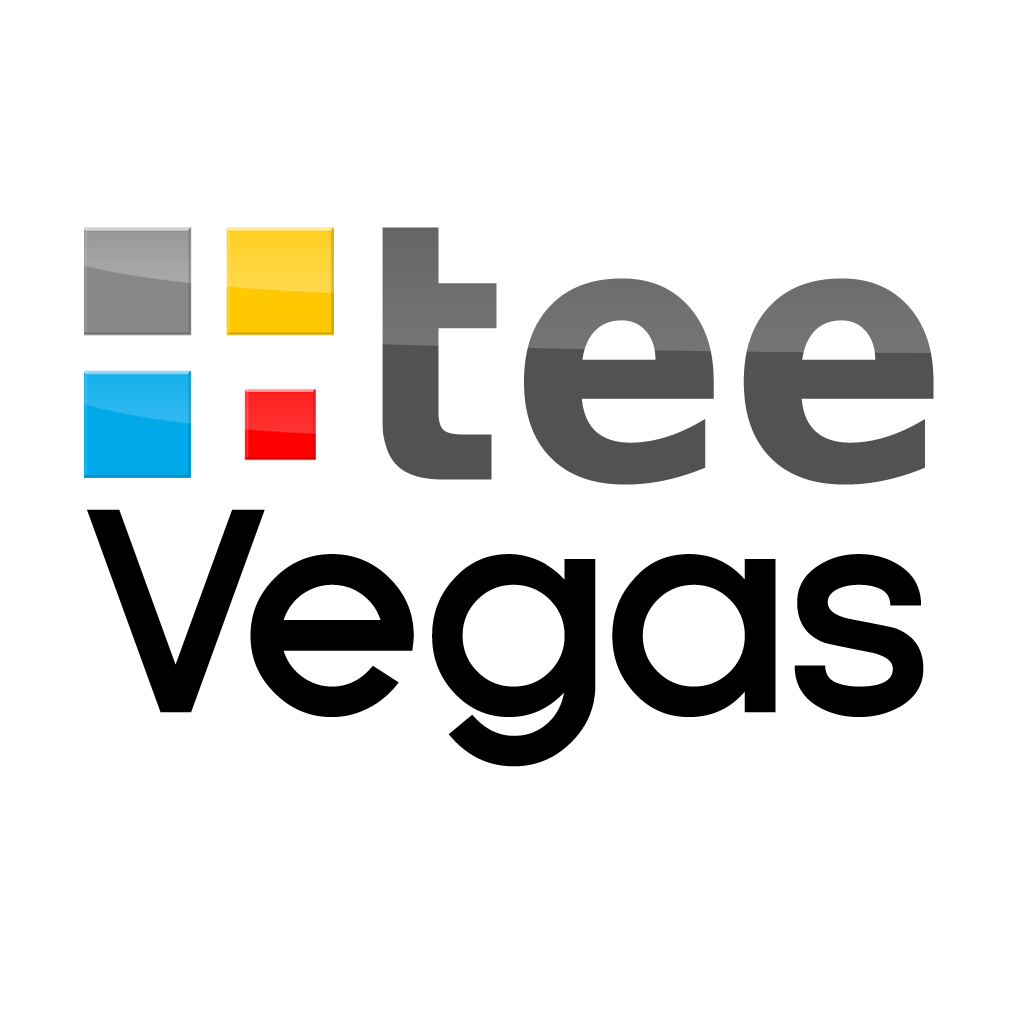
<style>
.page{position:relative;width:1024px;height:1024px;background:#ffffff}
.page>*{position:absolute;margin:0}
.t1{font:358.5px "DejaVuSansCondensed-Bold";color:#525252}
.t2{font:280.5px "Florencesans-Bold";color:#000000}
</style>
<div class="page">
<p class="t1" style="left:353px;top:227px;width:581px;height:258px">tee</p>
<p class="t2" style="left:87px;top:509px;width:837px;height:258px">Vegas</p>
</div>
